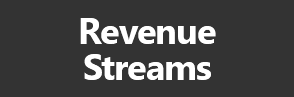
<style>
.page{position:relative;width:294px;height:97px;background:#333333}
.page>*{position:absolute;margin:0}
.t1{font:36px/36px "SegoeUI-Bold";letter-spacing:-0.025em;color:#ffffff}
</style>
<div class="page">
<p class="t1" style="left:80px;top:18px;width:136px;height:62px;text-align:center">Revenue<br>Streams</p>
</div>
